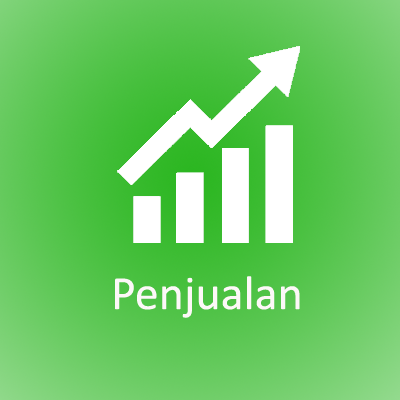
<style>
.page{position:relative;width:400px;height:400px}
.page>*{position:absolute;margin:0}
.t1{font:48px "Calibri";color:#fdf8f8}
</style>
<div class="page">
<p class="t1" style="left:115px;top:276px;width:185px;height:42px">Penjualan</p>
</div>
